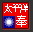
<style>
.page{position:relative;width:33px;height:32px;background:#f20000}
.page>*{position:absolute;margin:0}
.t1{font:10.4px "SimSun";letter-spacing:-0.25em;color:#ffffff}
.t2{font:11.7px "SimSun";color:#ffffff}
</style>
<div class="page">
<p class="t1" style="left:4px;top:4px;width:24px;height:9px">太平洋</p>
<p class="t2" style="left:16px;top:15px;width:11px;height:12px">奉</p>
</div>
